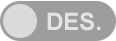
<style>
.page{position:relative;width:116px;height:41px;background:#9d9d9d}
.page>*{position:absolute;margin:0}
.t1{font:24px "Arial-BoldMT";color:#e3e3e3}
</style>
<div class="page">
<p class="t1" style="left:47px;top:12px;width:54px;height:19px">DES.</p>
</div>
